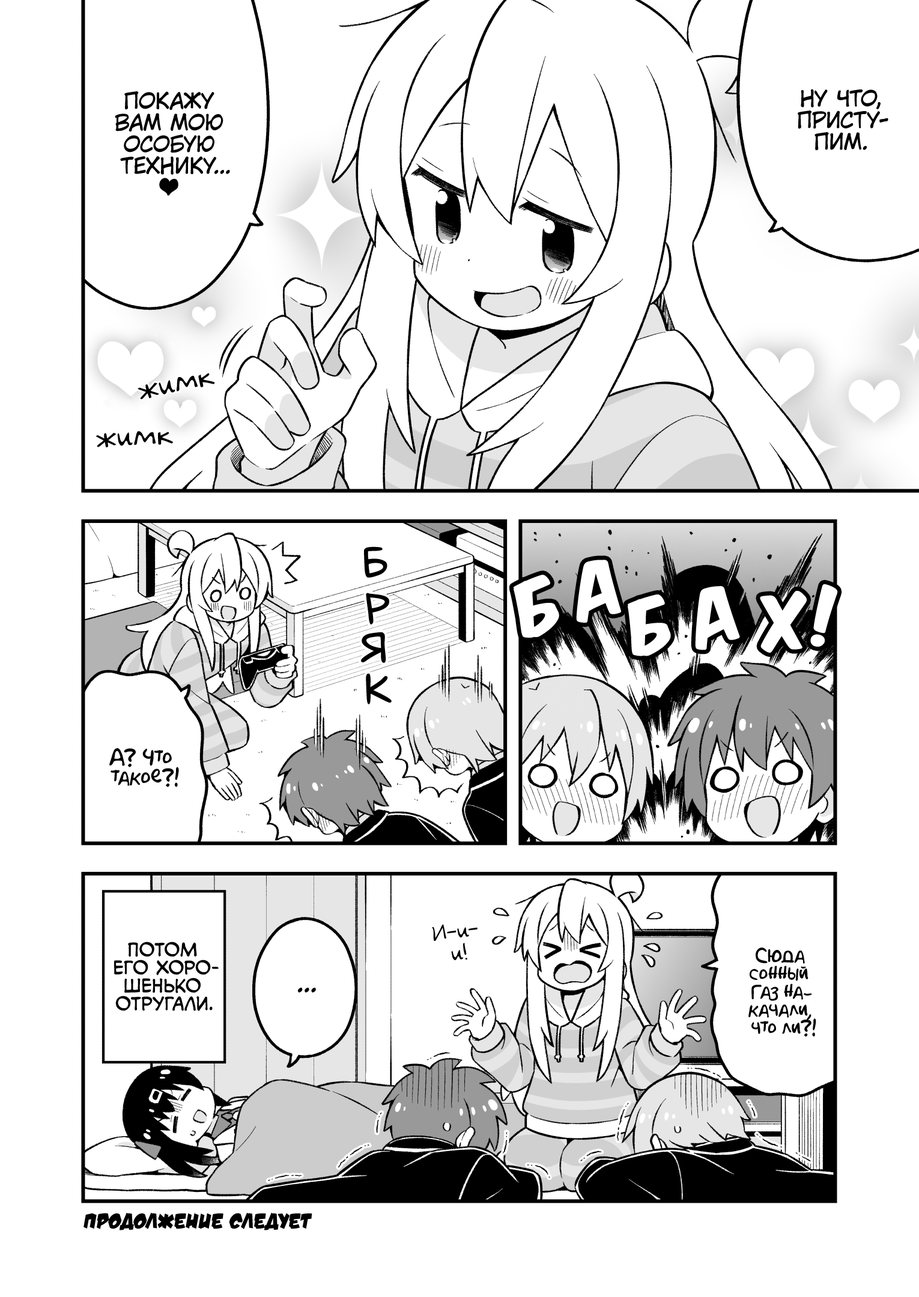
<style>
.page{position:relative;width:919px;height:1297px;background:#ffffff}
.page>*{position:absolute;margin:0}
.t1{font:21.6px "KuraiVoice2";color:#000000;text-transform:uppercase}
.t2{font:28.8px "v_Augie";color:#000000}
.t3{font:43.2px "laCartoonerie";color:#000000;text-transform:uppercase}
.t4{font:64.9px "KomikaTitle-AxisRUS-LAT";color:#ffffff}
.t5{font:19.8px "AkbarPlain";color:#000000}
.t6{font:21.6px "v_Augie";color:#000000}
.t7{font:18px "v_CCMonologous";color:#000000;text-transform:uppercase}
.t8{font:18px "AkbarPlain";color:#000000}
.t9{font:25.2px "KuraiVoice2";color:#000000;text-transform:uppercase}
.t10{font:21.6px "v_DamnNoisyKids";color:#000000;text-transform:uppercase}
</style>
<div class="page">
<p class="t1" style="left:798px;top:89px;width:90px;height:62px;text-align:center">Ну что,<br>присту-<br>пим.</p>
<p class="t1" style="left:115px;top:91px;width:115px;height:105px;text-align:center">Покажу<br>вам мою<br>особую<br>технику...<br>♥</p>
<p class="t2" style="left:138px;top:373px;width:77px;height:26px;rotate:-13deg">жимк</p>
<p class="t2" style="left:96px;top:431px;width:77px;height:17px;rotate:-4deg">жимк</p>
<p class="t3" style="left:364px;top:547px;width:23px;height:31px">б</p>
<p class="t4" style="left:576px;top:560px;width:45px;height:63px;rotate:-16deg">а</p>
<p class="t4" style="left:513px;top:575px;width:46px;height:63px;rotate:-17deg">б</p>
<p class="t3" style="left:366px;top:593px;width:23px;height:32px;rotate:3deg">р</p>
<p class="t4" style="left:695px;top:586px;width:45px;height:65px;rotate:-19deg">а</p>
<p class="t4" style="left:760px;top:591px;width:47px;height:62px;rotate:-6deg">х</p>
<p class="t4" style="left:810px;top:584px;width:28px;height:63px">!</p>
<p class="t4" style="left:628px;top:595px;width:43px;height:62px;rotate:-11deg">б</p>
<p class="t3" style="left:361px;top:632px;width:25px;height:31px;rotate:1deg">я</p>
<p class="t3" style="left:366px;top:673px;width:26px;height:32px;rotate:-1deg">к</p>
<p class="t5" style="left:109px;top:748px;width:70px;height:39px;text-align:center">А? Что<br>такое?!</p>
<p class="t6" style="left:432px;top:924px;width:46px;height:36px;text-align:center;rotate:-8deg">И-и-<br>и!</p>
<p class="t7" style="left:114px;top:942px;width:105px;height:70px;text-align:center">Потом<br>его хоро-<br>шенько<br>отругали.</p>
<p class="t8" style="left:748px;top:948px;width:68px;height:89px;text-align:center">Сюда<br>сонный<br>газ на-<br>качали,<br>что ли?!</p>
<p class="t9" style="left:298px;top:988px;width:18px;height:5px">...</p>
<p class="t10" style="left:83px;top:1213px;width:229px;height:18px">Продолжение следует</p>
</div>
